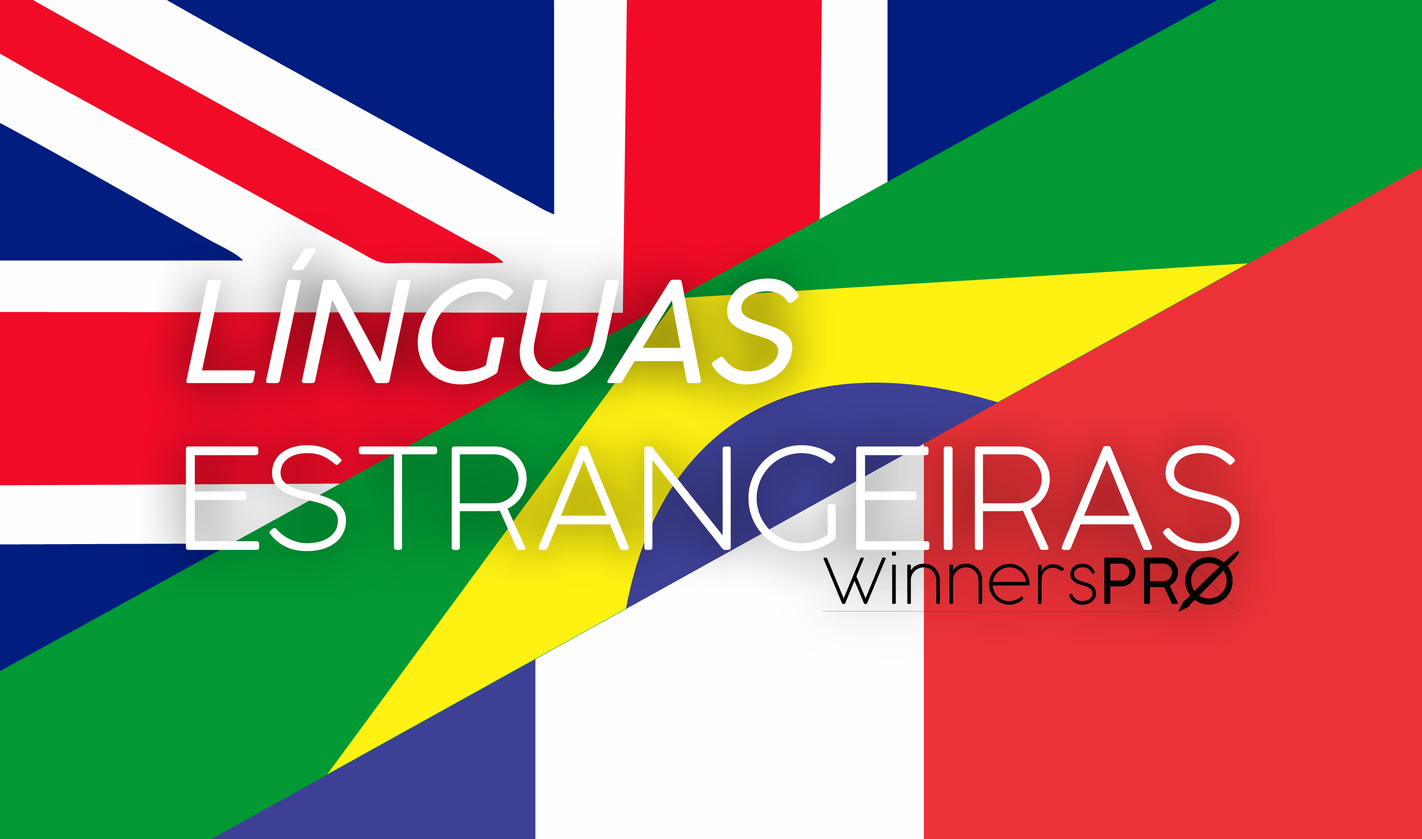
<style>
.page{position:relative;width:1422px;height:839px}
.page>*{position:absolute;margin:0}
.t1{font:139px "COCOGOOSE-UltraLight";color:#ffffff}
.t2{font:139px "CocogoosePro-LightItalic";color:#ffffff}
</style>
<div class="page">
<p class="t1" style="left:186px;top:248px;width:1053px;height:303px"><span class="t2">LÍNGUAS<br></span>ESTRANGEIRAS</p>
</div>
